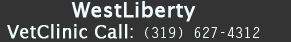
<style>
.page{position:relative;width:291px;height:42px;background:#333333}
.page>*{position:absolute;margin:0}
.t1{font:18px "LucidaSans";color:#f0fdff;font-weight:bold}
.t2{font:20.9px "LucidaSans";color:#f0fdff;font-weight:bold}
.t3{font:18px "LucidaSans";color:#f0fdff}
.t4{font:14px "LetterGothicStd";color:#f0fdff}
</style>
<div class="page">
<p class="t1" style="left:7px;top:1px;width:253px;height:38px;text-align:center"><span class="t2">WestLiberty<br></span>VetClinic Call<span class="t3">:</span><span class="t4"> (319) 627-4312</span></p>
</div>
